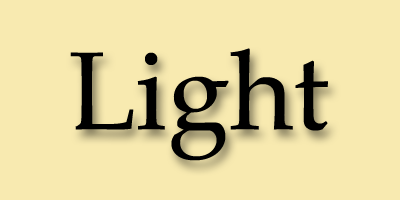
<style>
.page{position:relative;width:400px;height:200px;background:#f8eab0}
.page>*{position:absolute;margin:0}
.t1{font:110.7px "BookAntiqua";color:#000000}
</style>
<div class="page">
<p class="t1" style="left:70px;top:48px;width:258px;height:113px">Light</p>
</div>
